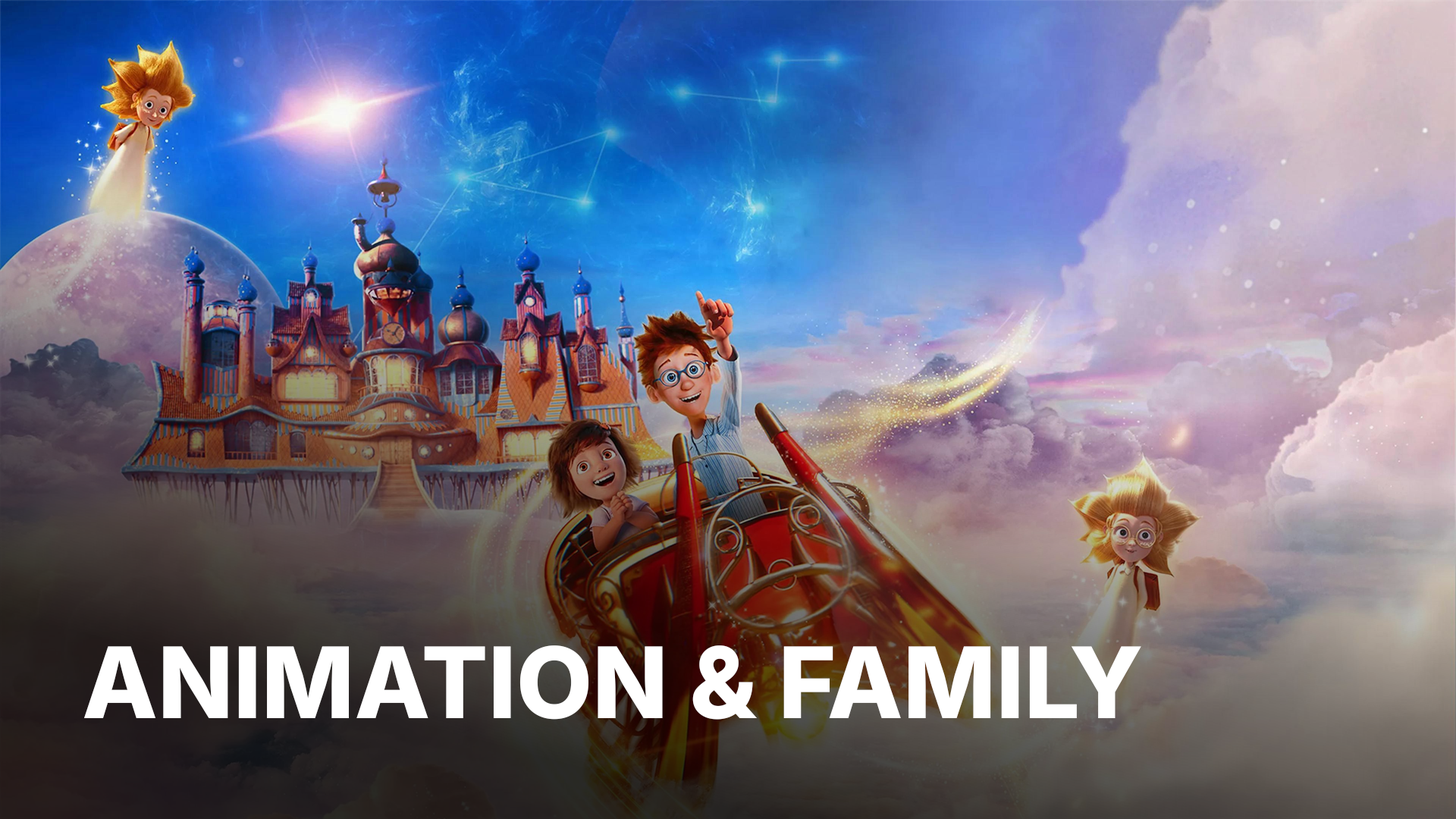
<style>
.page{position:relative;width:1456px;height:819px}
.page>*{position:absolute;margin:0}
.t1{font:98.6px "Inter-ExtraBold";color:#ffffff;text-transform:uppercase}
</style>
<div class="page">
<p class="t1" style="left:83px;top:645px;width:1059px;height:75px">Animation &amp; Family</p>
</div>
